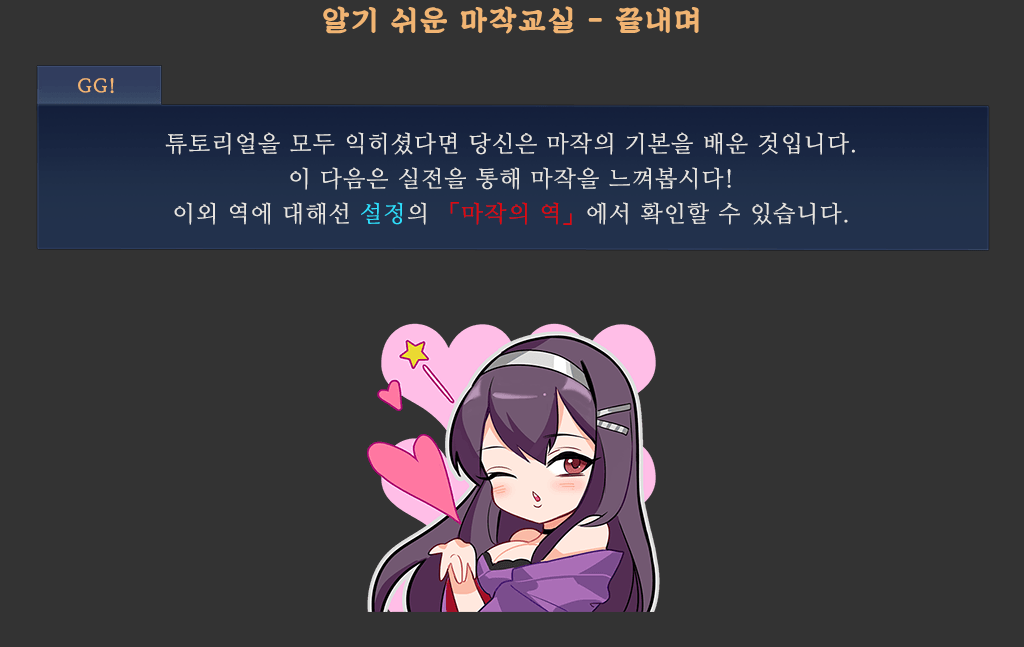
<style>
.page{position:relative;width:1024px;height:647px;background:#333333}
.page>*{position:absolute;margin:0}
.t1{font:29px "SDKukdetopokki-aLt";letter-spacing:0.06em;color:#f1b472;font-weight:bold}
.t2{font:18px "NanumMyeongjo";letter-spacing:0.06em;color:#f1b472;font-weight:bold}
.t3{font:23px/35px "NanumMyeongjo";letter-spacing:0.06em;color:#e7e5e1}
.t4{font:23px/35px "NanumMyeongjo";letter-spacing:0.06em;color:#2edefc}
.t5{font:23px/35px "NanumMyeongjo";letter-spacing:0.06em;color:#e0070d}
</style>
<div class="page">
<p class="t1" style="left:323px;top:6px;width:376px;height:28px">알기 쉬운 마작교실 - 끝내며</p>
<p class="t2" style="left:78px;top:78px;width:36px;height:16px">GG!</p>
<p class="t3" style="left:165px;top:132px;width:690px;height:93px;text-align:center">튜토리얼을 모두 익히셨다면 당신은 마작의 기본을 배운 것입니다.<br>이 다음은 실전을 통해 마작을 느껴봅시다!<br>이외 역에 대해선 <span class="t4">설정</span>의 <span class="t5">「마작의 역」</span>에서 확인할 수 있습니다.</p>
</div>
